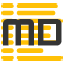
<style>
.page{position:relative;width:64px;height:64px;background:#ffffff}
.page>*{position:absolute;margin:0}
.t1{font:37.4px "AdventureSubtitles";color:#343434;text-transform:uppercase;font-weight:bold}
</style>
<div class="page">
<p class="t1" style="left:3px;top:19px;width:59px;height:27px">md</p>
</div>
